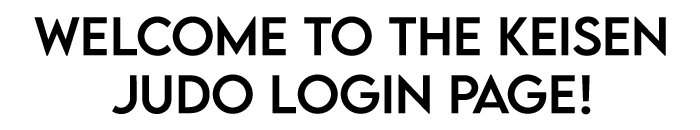
<style>
.page{position:relative;width:700px;height:130px;background:#ffffff}
.page>*{position:absolute;margin:0}
.t1{font:48px "LEMONMILK-Regular";color:#000000;font-weight:bold}
</style>
<div class="page">
<p class="t1" style="left:34px;top:16px;width:632px;height:99px;text-align:center">Welcome to the keisen<br>judo login page!</p>
</div>
